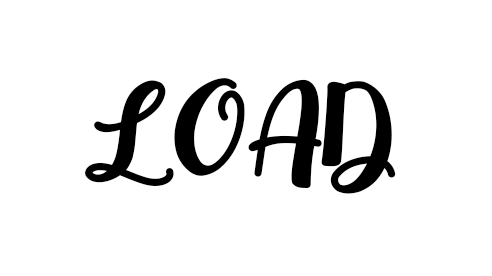
<style>
.page{position:relative;width:492px;height:276px;background:#ffffff}
.page>*{position:absolute;margin:0}
.t1{font:130.9px "SOV_Thanamas";letter-spacing:-0.025em;color:#000000;font-weight:bold}
</style>
<div class="page">
<p class="t1" style="left:85px;top:78px;width:311px;height:116px">LOAD</p>
</div>
